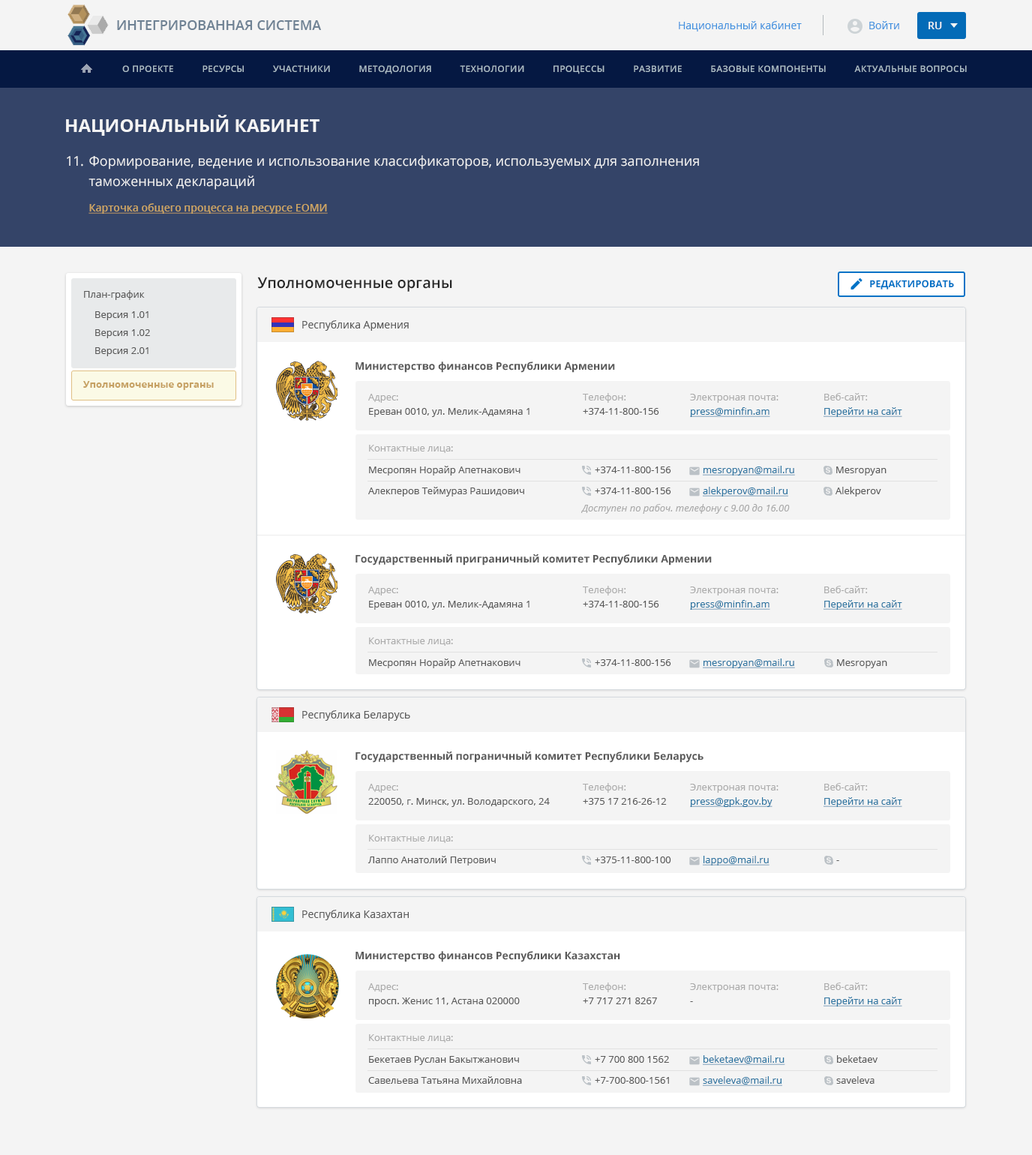
<style>
.page{position:relative;width:1032px;height:1155px;background:#f4f4f4}
.page>*{position:absolute;margin:0}
.t1{font:13.5px "OpenSans-Semibold";color:#6f8294;text-transform:uppercase}
.t2{font:10.5px "OpenSans";color:#4292df}
.t3{font:10.5px "OpenSans-Semibold";color:#f4f4f4}
.t4{font:9px "OpenSans-Semibold";letter-spacing:0.025em;color:#acbdc7;text-transform:uppercase}
.t5{font:18px "OpenSans-Bold";color:#f4f4f4;text-transform:uppercase}
.t6{font:13.5px "OpenSans";letter-spacing:-0.025em;color:#f4f4f4}
.t7{font:13.5px/20.3px "OpenSans";color:#f4f4f4}
.t8{font:10.5px "OpenSans-Semibold";color:#cea663;text-decoration:underline}
.t9{font:15px "OpenSans-Semibold";color:#262626}
.t10{font:9.8px "OpenSans-Bold";color:#0072c6;text-transform:uppercase}
.t11{font:9.8px "OpenSans";color:#595959}
.t12{font:9.8px/18px "OpenSans";color:#595959}
.t13{font:10.5px "OpenSans";color:#595959}
.t14{font:10.5px "OpenSans-Bold";color:#595959}
.t15{font:9.8px "OpenSans-Bold";color:#c6a163}
.t16{font:9.8px "OpenSans";color:#ababab}
.t17{font:9.8px "OpenSans";color:#2b74a1;text-decoration:underline}
.t18{font:9.8px "OpenSans-Italic";color:#ababab}
</style>
<div class="page">
<p class="t1" style="left:117px;top:20px;width:204px;height:10px">Интегрированная система</p>
<p class="t2" style="left:679px;top:21px;width:123px;height:11px">Национальный кабинет</p>
<p class="t2" style="left:869px;top:21px;width:30px;height:8px">Войти</p>
<p class="t3" style="left:929px;top:22px;width:13px;height:7px">RU</p>
<p class="t4" style="left:122px;top:65px;width:845px;height:9px">О проекте           Ресурсы           Участники           Методология           Технологии           Процессы           Развитие           Базовые компоненты           Актуальные вопросы</p>
<p class="t5" style="left:66px;top:115px;width:254px;height:21px">Национальный кабинет</p>
<p class="t6" style="left:67px;top:156px;width:16px;height:11px">11.</p>
<p class="t7" style="left:89px;top:155px;width:610px;height:35px">Формирование, ведение и использование классификаторов, используемых для заполнения таможенных деклараций</p>
<p class="t8" style="left:89px;top:203px;width:239px;height:11px">Карточка общего процесса на ресурсе ЕОМИ</p>
<p class="t9" style="left:257px;top:277px;width:195px;height:15px">Уполномоченные органы</p>
<p class="t10" style="left:870px;top:280px;width:84px;height:10px">Редактировать</p>
<p class="t11" style="left:84px;top:290px;width:61px;height:10px">План-график</p>
<p class="t12" style="left:95px;top:311px;width:55px;height:45px">Версия 1.01<br>Версия 1.02<br>Версия 2.01</p>
<p class="t13" style="left:302px;top:320px;width:107px;height:11px">Республика Армения</p>
<p class="t14" style="left:356px;top:362px;width:259px;height:11px">Министерство финансов Республики Армении</p>
<p class="t15" style="left:83px;top:381px;width:131px;height:9px">Уполномоченные органы</p>
<p class="t16" style="left:368px;top:394px;width:30px;height:9px">Адрес:</p>
<p class="t16" style="left:583px;top:393px;width:43px;height:10px">Телефон:</p>
<p class="t16" style="left:690px;top:394px;width:89px;height:9px">Электроная почта:</p>
<p class="t16" style="left:824px;top:393px;width:44px;height:8px">Веб-сайт:</p>
<p class="t11" style="left:369px;top:408px;width:161px;height:9px">Ереван 0010, ул. Мелик-Адамяна 1</p>
<p class="t11" style="left:583px;top:408px;width:76px;height:7px">+374-11-800-156</p>
<p class="t17" style="left:690px;top:407px;width:80px;height:10px">press@minfin.am</p>
<p class="t17" style="left:824px;top:407px;width:78px;height:10px">Перейти на сайт</p>
<p class="t16" style="left:369px;top:445px;width:84px;height:8px">Контактные лица:</p>
<p class="t11" style="left:369px;top:466px;width:152px;height:10px">Месропян Норайр Апетнакович</p>
<p class="t11" style="left:595px;top:467px;width:76px;height:6px">+374-11-800-156</p>
<p class="t17" style="left:703px;top:466px;width:92px;height:10px">mesropyan@mail.ru</p>
<p class="t11" style="left:836px;top:467px;width:51px;height:9px">Mesropyan</p>
<p class="t11" style="left:368px;top:487px;width:156px;height:10px">Алекперов Теймураз Рашидович</p>
<p class="t11" style="left:595px;top:488px;width:76px;height:6px">+374-11-800-156</p>
<p class="t17" style="left:703px;top:487px;width:85px;height:10px">alekperov@mail.ru</p>
<p class="t11" style="left:836px;top:487px;width:45px;height:10px">Alekperov</p>
<p class="t18" style="left:581px;top:504px;width:209px;height:10px">Доступен по рабоч. телефону с 9.00 до 16.00</p>
<p class="t14" style="left:356px;top:554px;width:356px;height:12px">Государственный приграничный комитет Республики Армении</p>
<p class="t16" style="left:368px;top:587px;width:30px;height:9px">Адрес:</p>
<p class="t16" style="left:583px;top:586px;width:43px;height:10px">Телефон:</p>
<p class="t16" style="left:690px;top:587px;width:89px;height:9px">Электроная почта:</p>
<p class="t16" style="left:824px;top:586px;width:44px;height:7px">Веб-сайт:</p>
<p class="t11" style="left:369px;top:601px;width:161px;height:9px">Ереван 0010, ул. Мелик-Адамяна 1</p>
<p class="t11" style="left:583px;top:601px;width:76px;height:7px">+374-11-800-156</p>
<p class="t17" style="left:690px;top:600px;width:80px;height:10px">press@minfin.am</p>
<p class="t17" style="left:824px;top:600px;width:78px;height:10px">Перейти на сайт</p>
<p class="t16" style="left:369px;top:638px;width:84px;height:8px">Контактные лица:</p>
<p class="t11" style="left:369px;top:659px;width:152px;height:9px">Месропян Норайр Апетнакович</p>
<p class="t11" style="left:595px;top:659px;width:76px;height:7px">+374-11-800-156</p>
<p class="t17" style="left:703px;top:659px;width:92px;height:9px">mesropyan@mail.ru</p>
<p class="t11" style="left:837px;top:659px;width:50px;height:9px">Mesropyan</p>
<p class="t13" style="left:302px;top:710px;width:108px;height:11px">Республика Беларусь</p>
<p class="t14" style="left:356px;top:752px;width:348px;height:11px">Государственный пограничный комитет Республики Беларусь</p>
<p class="t16" style="left:368px;top:784px;width:30px;height:9px">Адрес:</p>
<p class="t16" style="left:583px;top:783px;width:43px;height:10px">Телефон:</p>
<p class="t16" style="left:690px;top:784px;width:89px;height:9px">Электроная почта:</p>
<p class="t16" style="left:824px;top:783px;width:44px;height:8px">Веб-сайт:</p>
<p class="t17" style="left:690px;top:797px;width:83px;height:10px">press@gpk.gov.by</p>
<p class="t17" style="left:824px;top:797px;width:78px;height:10px">Перейти на сайт</p>
<p class="t11" style="left:368px;top:798px;width:182px;height:9px">220050, г. Минск, ул. Володарского, 24</p>
<p class="t11" style="left:583px;top:798px;width:84px;height:7px">+375 17 216-26-12</p>
<p class="t16" style="left:369px;top:835px;width:84px;height:8px">Контактные лица:</p>
<p class="t11" style="left:368px;top:856px;width:128px;height:10px">Лаппо Анатолий Петрович</p>
<p class="t11" style="left:595px;top:857px;width:76px;height:6px">+375-11-800-100</p>
<p class="t17" style="left:703px;top:856px;width:67px;height:10px">lappo@mail.ru</p>
<p class="t11" style="left:836px;top:860px;width:3px;height:1px">-</p>
<p class="t13" style="left:302px;top:910px;width:107px;height:10px">Республика Казахтан</p>
<p class="t14" style="left:356px;top:951px;width:264px;height:11px">Министерство финансов Республики Казахстан</p>
<p class="t16" style="left:368px;top:983px;width:30px;height:9px">Адрес:</p>
<p class="t16" style="left:583px;top:983px;width:43px;height:9px">Телефон:</p>
<p class="t16" style="left:690px;top:983px;width:89px;height:9px">Электроная почта:</p>
<p class="t16" style="left:824px;top:983px;width:44px;height:7px">Веб-сайт:</p>
<p class="t11" style="left:369px;top:998px;width:151px;height:9px">просп. Женис 11, Астана 020000</p>
<p class="t11" style="left:583px;top:998px;width:74px;height:6px">+7 717 271 8267</p>
<p class="t11" style="left:690px;top:1001px;width:3px;height:1px">-</p>
<p class="t17" style="left:824px;top:997px;width:78px;height:10px">Перейти на сайт</p>
<p class="t16" style="left:369px;top:1034px;width:84px;height:9px">Контактные лица:</p>
<p class="t11" style="left:369px;top:1056px;width:150px;height:9px">Бекетаев Руслан Бакытжанович</p>
<p class="t11" style="left:595px;top:1056px;width:74px;height:7px">+7 700 800 1562</p>
<p class="t17" style="left:703px;top:1055px;width:82px;height:10px">beketaev@mail.ru</p>
<p class="t11" style="left:837px;top:1055px;width:41px;height:8px">beketaev</p>
<p class="t11" style="left:368px;top:1076px;width:154px;height:8px">Савельева Татьяна Михайловна</p>
<p class="t11" style="left:595px;top:1077px;width:74px;height:7px">+7-700-800-1561</p>
<p class="t17" style="left:703px;top:1076px;width:79px;height:10px">saveleva@mail.ru</p>
<p class="t11" style="left:836px;top:1076px;width:39px;height:8px">saveleva</p>
</div>
